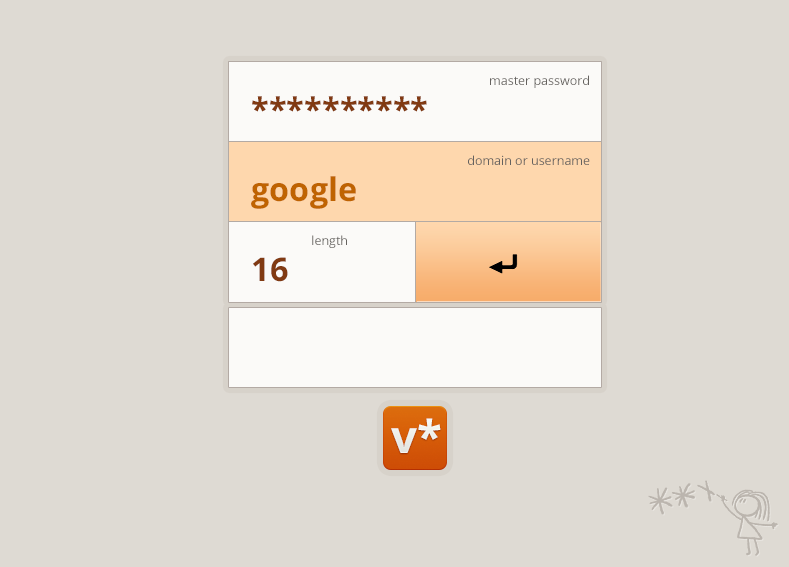
<style>
.page{position:relative;width:789px;height:567px;background:#dedad3}
.page>*{position:absolute;margin:0}
.t1{font:12.5px "OpenSans";color:#65625f}
.t2{font:32.5px "OpenSans-Bold";color:#813a12}
.t3{font:32.5px "OpenSans-Bold";color:#bf6301}
</style>
<div class="page">
<p class="t1" style="left:490px;top:75px;width:99px;height:13px">master password</p>
<p class="t2" style="left:252px;top:96px;width:175px;height:16px">**********</p>
<p class="t1" style="left:468px;top:155px;width:122px;height:10px">domain or username</p>
<p class="t3" style="left:251px;top:176px;width:105px;height:33px">google</p>
<p class="t1" style="left:312px;top:235px;width:35px;height:13px">length</p>
<p class="t2" style="left:253px;top:257px;width:35px;height:25px">16</p>
</div>
